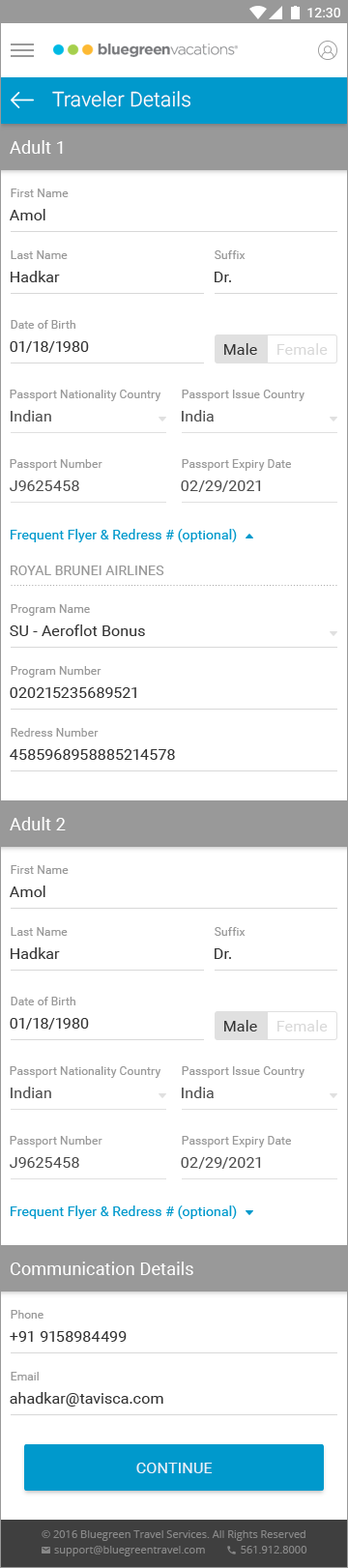
<style>
.page{position:relative;width:348px;height:1568px;background:#ffffff}
.page>*{position:absolute;margin:0}
.t1{font:20.3px "Roboto-Light";letter-spacing:0.01em;color:#ffffff}
.t2{font:17.4px "Roboto-Regular";letter-spacing:0.01em;color:#ffffff}
.t3{font:11.6px "Roboto-Regular";letter-spacing:0.01em;color:#999999}
.t4{font:15.5px "Roboto-Regular";letter-spacing:0.01em;color:#333333}
.t5{font:15.5px "Roboto-Regular";letter-spacing:0.01em;color:#d8d8d8}
.t6{font:15.5px "Roboto-Regular";letter-spacing:0.01em;color:#4d4d4d}
.t7{font:13.5px "Roboto-Regular";letter-spacing:0.01em;color:#0099cc}
.t8{font:13.5px "Roboto-Regular";letter-spacing:0.01em;color:#999999;text-transform:uppercase}
.t9{font:15.5px "Roboto-Regular";letter-spacing:0.01em;color:#ffffff;text-transform:uppercase}
</style>
<div class="page">
<p class="t1" style="left:52px;top:91px;width:138px;height:16px">Traveler Details</p>
<p class="t2" style="left:10px;top:140px;width:53px;height:14px">Adult 1</p>
<p class="t3" style="left:11px;top:189px;width:58px;height:8px">First Name</p>
<p class="t4" style="left:10px;top:209px;width:35px;height:11px">Amol</p>
<p class="t3" style="left:11px;top:250px;width:57px;height:9px">Last Name</p>
<p class="t3" style="left:215px;top:250px;width:31px;height:9px">Suffix</p>
<p class="t4" style="left:11px;top:271px;width:49px;height:11px">Hadkar</p>
<p class="t4" style="left:215px;top:272px;width:16px;height:10px">Dr.</p>
<p class="t3" style="left:11px;top:320px;width:64px;height:9px">Date of Birth</p>
<p class="t4" style="left:10px;top:341px;width:79px;height:12px">01/18/1980</p>
<p class="t4" style="left:224px;top:343px;width:33px;height:12px">Male</p>
<p class="t5" style="left:277px;top:343px;width:51px;height:12px">Female</p>
<p class="t3" style="left:10px;top:390px;width:151px;height:11px">Passport Nationality Country</p>
<p class="t3" style="left:182px;top:390px;width:123px;height:11px">Passport Issue Country</p>
<p class="t6" style="left:11px;top:410px;width:40px;height:11px">Indian</p>
<p class="t6" style="left:182px;top:410px;width:32px;height:11px">India</p>
<p class="t3" style="left:10px;top:459px;width:92px;height:12px">Passport Number</p>
<p class="t3" style="left:182px;top:459px;width:109px;height:12px">Passport Expiry Date</p>
<p class="t6" style="left:10px;top:480px;width:69px;height:11px">J9625458</p>
<p class="t6" style="left:181px;top:480px;width:80px;height:12px">02/29/2021</p>
<p class="t7" style="left:11px;top:529px;width:226px;height:13px">Frequent Flyer &amp; Redress # (optional)</p>
<p class="t8" style="left:11px;top:566px;width:153px;height:9px">Royal Brunei Airlines</p>
<p class="t3" style="left:11px;top:604px;width:79px;height:12px">Program Name</p>
<p class="t4" style="left:10px;top:624px;width:135px;height:12px">SU - Aeroflot Bonus</p>
<p class="t3" style="left:11px;top:666px;width:91px;height:12px">Program Number</p>
<p class="t4" style="left:10px;top:687px;width:126px;height:11px">020215235689521</p>
<p class="t3" style="left:11px;top:728px;width:88px;height:9px">Redress Number</p>
<p class="t4" style="left:10px;top:749px;width:165px;height:11px">4585968958885214578</p>
<p class="t2" style="left:10px;top:817px;width:56px;height:13px">Adult 2</p>
<p class="t3" style="left:11px;top:865px;width:58px;height:9px">First Name</p>
<p class="t4" style="left:10px;top:886px;width:35px;height:11px">Amol</p>
<p class="t3" style="left:11px;top:927px;width:57px;height:9px">Last Name</p>
<p class="t3" style="left:215px;top:927px;width:31px;height:9px">Suffix</p>
<p class="t4" style="left:11px;top:947px;width:49px;height:12px">Hadkar</p>
<p class="t4" style="left:215px;top:948px;width:16px;height:11px">Dr.</p>
<p class="t3" style="left:11px;top:997px;width:64px;height:8px">Date of Birth</p>
<p class="t4" style="left:10px;top:1018px;width:79px;height:12px">01/18/1980</p>
<p class="t4" style="left:224px;top:1020px;width:33px;height:11px">Male</p>
<p class="t5" style="left:277px;top:1020px;width:51px;height:11px">Female</p>
<p class="t3" style="left:10px;top:1066px;width:151px;height:12px">Passport Nationality Country</p>
<p class="t3" style="left:182px;top:1066px;width:123px;height:12px">Passport Issue Country</p>
<p class="t6" style="left:11px;top:1087px;width:40px;height:11px">Indian</p>
<p class="t6" style="left:182px;top:1087px;width:32px;height:11px">India</p>
<p class="t3" style="left:10px;top:1136px;width:92px;height:11px">Passport Number</p>
<p class="t3" style="left:182px;top:1136px;width:109px;height:11px">Passport Expiry Date</p>
<p class="t6" style="left:10px;top:1157px;width:69px;height:11px">J9625458</p>
<p class="t6" style="left:181px;top:1157px;width:80px;height:12px">02/29/2021</p>
<p class="t7" style="left:11px;top:1205px;width:226px;height:14px">Frequent Flyer &amp; Redress # (optional)</p>
<p class="t2" style="left:10px;top:1262px;width:183px;height:13px">Communication Details</p>
<p class="t3" style="left:11px;top:1310px;width:33px;height:9px">Phone</p>
<p class="t4" style="left:10px;top:1331px;width:117px;height:11px">+91 9158984499</p>
<p class="t3" style="left:11px;top:1372px;width:28px;height:8px">Email</p>
<p class="t4" style="left:10px;top:1392px;width:153px;height:15px">ahadkar@tavisca.com</p>
<p class="t9" style="left:136px;top:1463px;width:77px;height:10px;opacity:0.87">CONTINUE</p>
</div>
